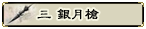
<style>
.page{position:relative;width:146px;height:29px;background:#d9d5bd}
.page>*{position:absolute;margin:0}
.t1{font:14px "HYf2gf";letter-spacing:-0.04em;color:#000000;font-weight:bold}
</style>
<div class="page">
<p class="t1" style="left:37px;top:10px;width:14px;height:9px">三</p>
<p class="t1" style="left:57px;top:9px;width:42px;height:11px">银月枪</p>
</div>
